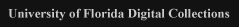
<style>
.page{position:relative;width:239px;height:27px;background:#121212}
.page>*{position:absolute;margin:0}
.t1{font:13px "TimesNewRomanPS-BoldMT";color:#cccccc}
</style>
<div class="page">
<p class="t1" style="left:8px;top:8px;width:222px;height:13px">University of Florida Digital Collections</p>
</div>
